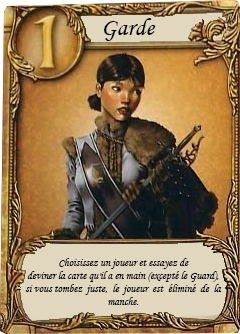
<style>
.page{position:relative;width:240px;height:334px}
.page>*{position:absolute;margin:0}
.t1{font:25px "MonotypeCorsiva";color:#000000}
.t2{font:11px "MonotypeCorsiva";color:#000000}
</style>
<div class="page">
<p class="t1" style="left:104px;top:18px;width:52px;height:23px">Garde</p>
<p class="t2" style="left:25px;top:258px;width:197px;height:47px;text-align:center">Choisissez un joueur et essayez de <br>deviner la carte qu'il a en main (excepté le Guard), <br>si vous tombez  juste,  le  joueur  est  éliminé  de  la <br>manche.</p>
</div>
